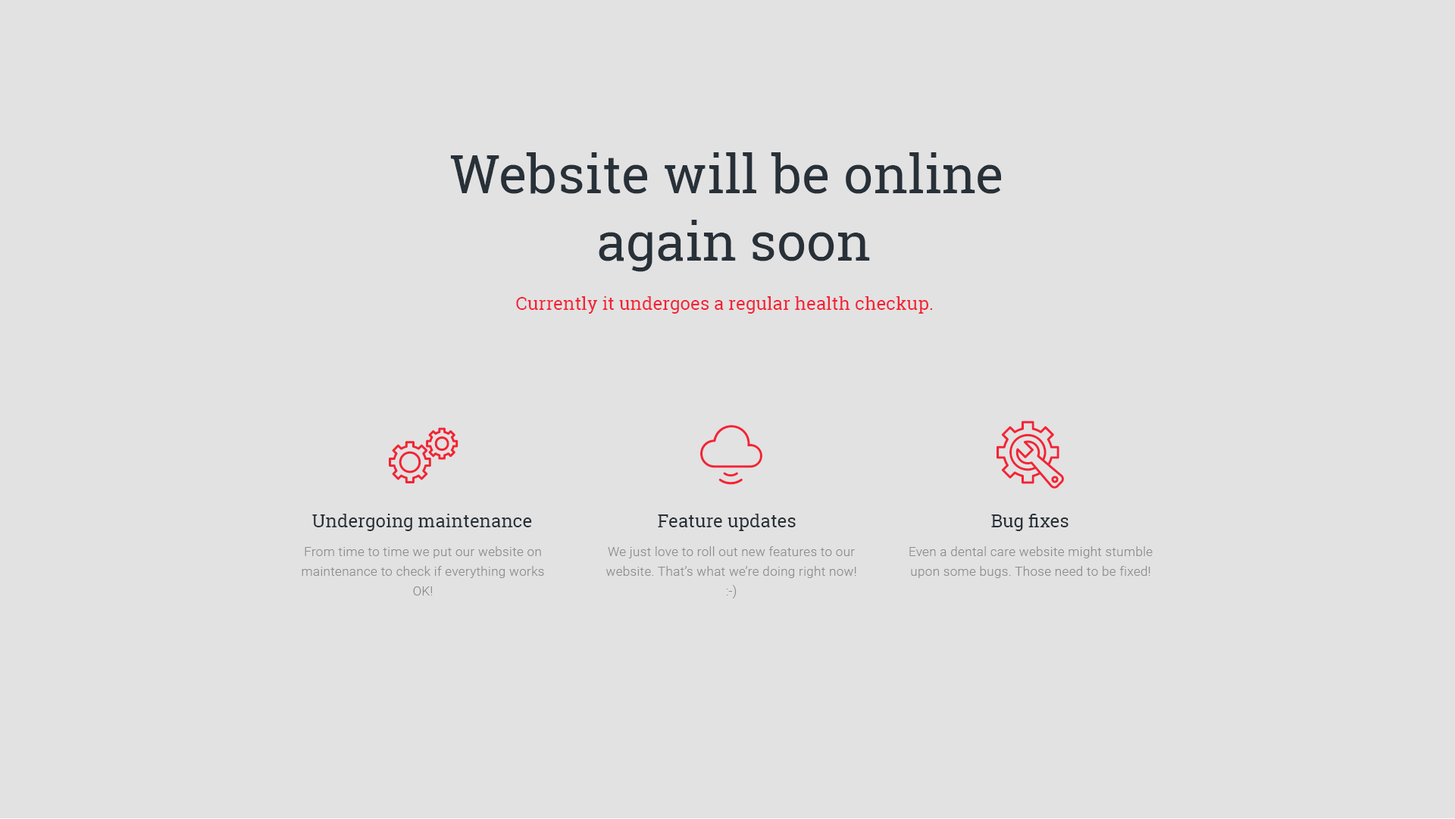
<style>
.page{position:relative;width:1455px;height:819px;background:#e2e2e2}
.page>*{position:absolute;margin:0}
.t1{font:53.1px/67.5px "RobotoSlab-Regular";color:#283038}
.t2{font:18.2px "RobotoSlab-Regular";color:#f32335}
.t3{font:18.2px "RobotoSlab-Regular";color:#283038}
.t4{font:12.9px/19.7px "Roboto-Light";letter-spacing:0.02em;color:#8d8d8f}
</style>
<div class="page">
<p class="t1" style="left:450px;top:152px;width:551px;height:120px;text-align:center">Website will be online <br>again soon</p>
<p class="t2" style="left:516px;top:296px;width:416px;height:18px">Currently it undergoes a regular health checkup.</p>
<p class="t3" style="left:312px;top:514px;width:220px;height:17px">Undergoing maintenance</p>
<p class="t3" style="left:658px;top:514px;width:138px;height:17px">Feature updates</p>
<p class="t3" style="left:991px;top:514px;width:78px;height:17px">Bug fixes</p>
<p class="t4" style="left:302px;top:546px;width:242px;height:50px;text-align:center">From time to time we put our website on maintenance to check if everything works OK!</p>
<p class="t4" style="left:606px;top:546px;width:251px;height:53px;text-align:center">We just love to roll out new features to our website. That’s what we’re doing right now! :-)</p>
<p class="t4" style="left:910px;top:546px;width:243px;height:32px;text-align:center">Even a dental care website might stumble upon some bugs. Those need to be fixed!</p>
</div>
